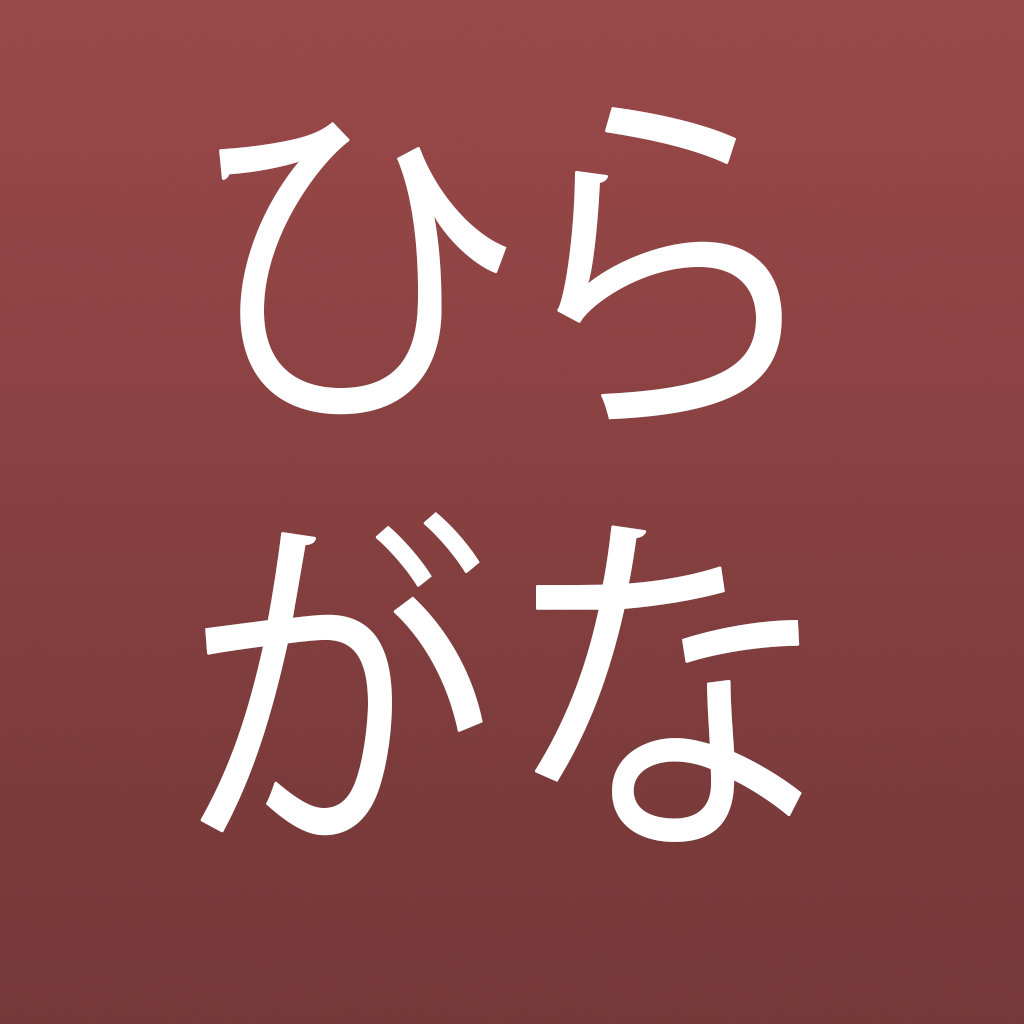
<style>
.page{position:relative;width:1024px;height:1024px}
.page>*{position:absolute;margin:0}
.t1{font:350.5px "KozGoPr6N-Regular";letter-spacing:0.02em;color:#ffffff;font-weight:bold;scale:0.9 1}
</style>
<div class="page">
<p class="t1" style="left:200px;top:107px;width:602px;height:735px;text-align:center">ひら<br>がな</p>
</div>
